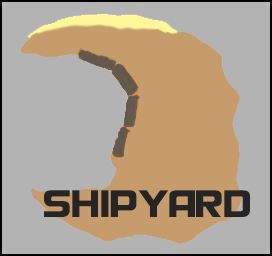
<style>
.page{position:relative;width:272px;height:256px;background:#b3b3b3}
.page>*{position:absolute;margin:0}
.t1{font:33.3px "HyundaiNormal";color:#252525}
</style>
<div class="page">
<p class="t1" style="left:44px;top:190px;width:206px;height:27px">Shipyard</p>
</div>
